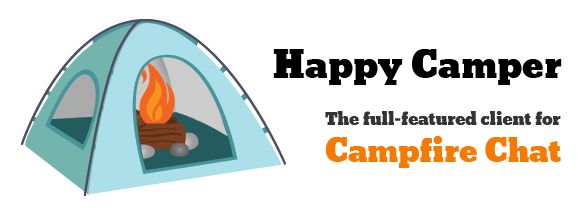
<style>
.page{position:relative;width:585px;height:220px;background:#ffffff}
.page>*{position:absolute;margin:0}
.t1{font:36px "Bevan";color:#000000}
.t2{font:16.5px "Bevan";color:#333333}
.t3{font:30.5px "Bevan";color:#f67900}
</style>
<div class="page">
<p class="t1" style="left:273px;top:49px;width:289px;height:36px">Happy Camper</p>
<p class="t2" style="left:325px;top:111px;width:236px;height:57px">The full-featured client for<br><span class="t3">Campfire Chat</span></p>
</div>
